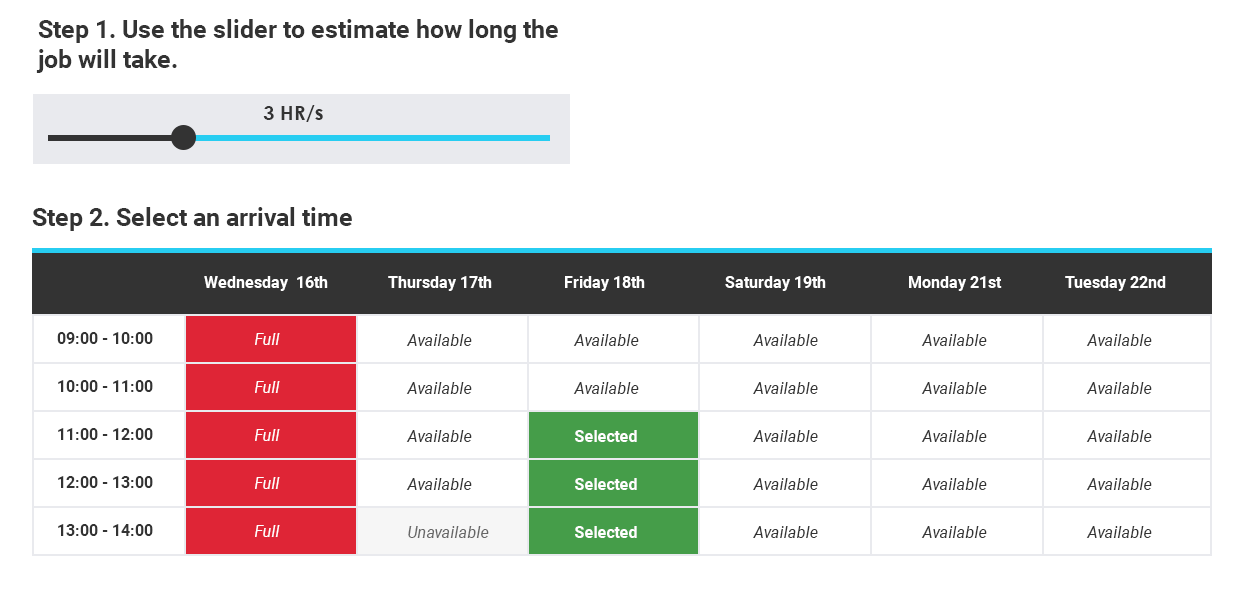
<style>
.page{position:relative;width:1243px;height:606px;background:#ffffff}
.page>*{position:absolute;margin:0}
.t1{font:25px/35px "Roboto-Bold";color:#333333}
.t2{font:25px/30px "Roboto-Bold";color:#333333}
.t3{font:20px "CenturyGothic-Bold";color:#333333}
.t4{font:16px "CenturyGothic-Bold";color:#333333}
.t5{font:25px "Roboto-Bold";color:#333333}
.t6{font:16px "Roboto-Bold";color:#ffffff}
.t7{font:16px/48px "Roboto-Bold";color:#333333}
.t8{font:16px/48px "Roboto-Italic";color:#ffffff}
.t9{font:16px/45px "Roboto-Italic";color:#ffffff}
.t10{font:16px/48px "Roboto-Italic";color:#333333}
.t11{font:16px/45px "Roboto-Italic";color:#333333}
.t12{font:16px/48px "Roboto-Italic";color:#666666}
</style>
<div class="page">
<p class="t1" style="left:36px;top:19px;width:522px;height:54px">Step 1. Use the slider to estimate how long t<span class="t2">he job will take.</span></p>
<p class="t3" style="left:263px;top:105px;width:60px;height:17px"><span class="t4">     </span>3 HR/s</p>
<p class="t5" style="left:32px;top:207px;width:320px;height:24px">Step 2. Select an arrival time</p>
<p class="t6" style="left:204px;top:276px;width:962px;height:15px">Wednesday  16th      Thursday 17th                  Friday 18th                    Saturday 19th                Monday 21st                Tuesday 22nd</p>
<p class="t7" style="left:57px;top:332px;width:96px;height:204px">09:00 - 10:00<br>10:00 - 11:00<br>11:00 - 12:00<br>12:00 - 13:00<br>13:00 - 14:00</p>
<p class="t8" style="left:255px;top:333px;width:25px;height:204px;text-align:center"><span class="t9">Full<br></span>Full<br>Full<br>Full<br>Full</p>
<p class="t10" style="left:406px;top:334px;width:83px;height:204px"><span class="t11">Available<br></span>Available<br>Available<br>Available<br><span class="t12">Unavailable</span></p>
<p class="t10" style="left:753px;top:334px;width:65px;height:204px;text-align:center"><span class="t11">Available<br></span>Available<br>Available<br>Available<br>Available</p>
<p class="t10" style="left:921px;top:334px;width:66px;height:204px"><span class="t11">Available<br></span>Available<br>Available<br>Available<br>Available</p>
<p class="t10" style="left:1086px;top:334px;width:66px;height:204px"><span class="t11">Available<br></span>Available<br>Available<br>Available<br>Available</p>
</div>
